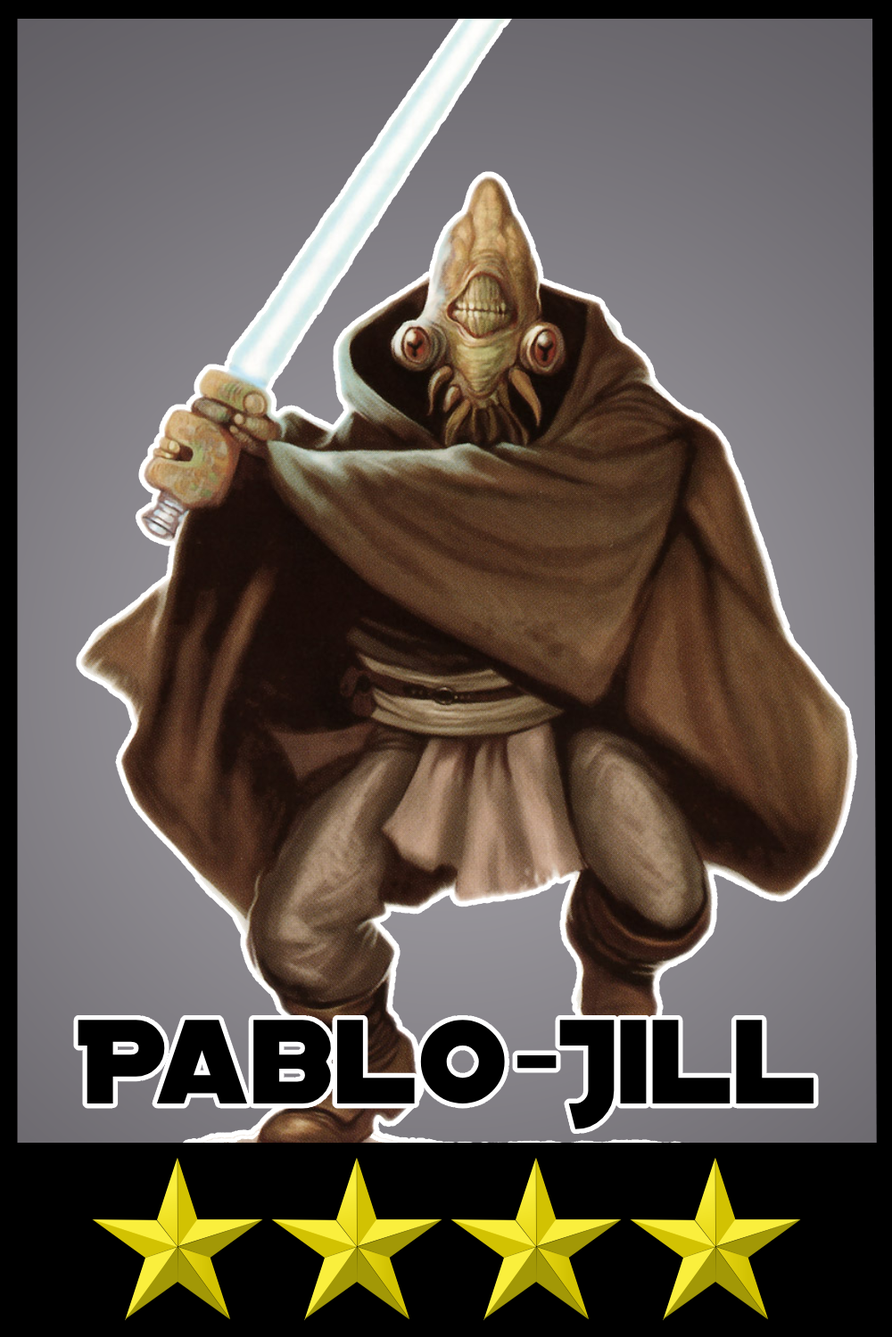
<style>
.page{position:relative;width:892px;height:1337px}
.page>*{position:absolute;margin:0}
.t1{font:128.7px "DistantGalaxy";color:#000000}
</style>
<div class="page">
<p class="t1" style="left:78px;top:1020px;width:736px;height:110px">Pablo-Jill</p>
</div>
